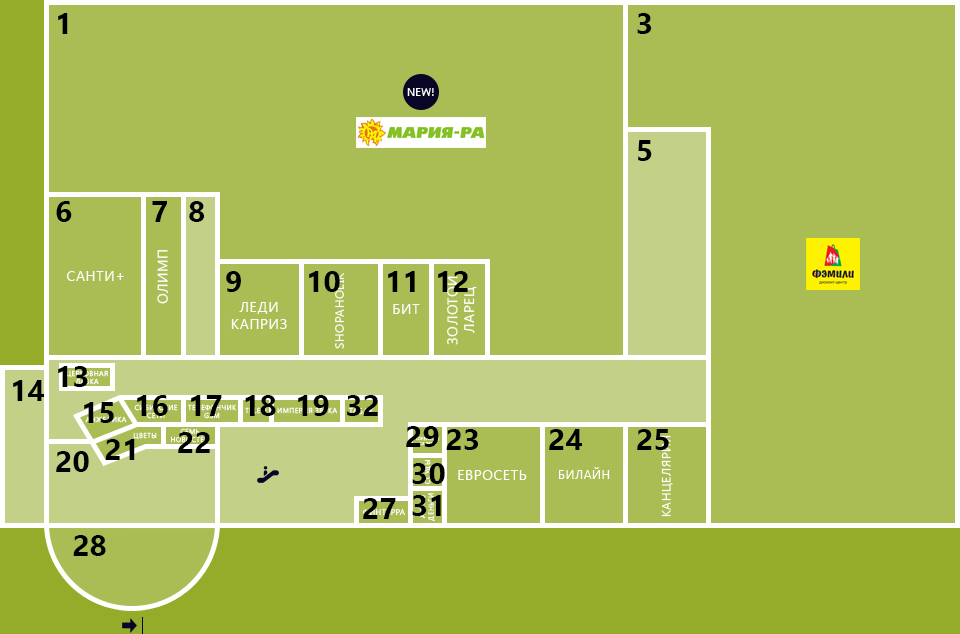
<style>
.page{position:relative;width:960px;height:634px;background:#a9bd54}
.page>*{position:absolute;margin:0}
.t1{font:30px "SegoeUI-Bold";color:#000000}
</style>
<div class="page">
<p class="t1" style="left:58px;top:13px;width:10px;height:21px">1</p>
<p class="t1" style="left:637px;top:13px;width:15px;height:21px">3</p>
<p class="t1" style="left:638px;top:140px;width:14px;height:21px">5</p>
<p class="t1" style="left:56px;top:201px;width:16px;height:21px">6</p>
<p class="t1" style="left:152px;top:201px;width:15px;height:21px">7</p>
<p class="t1" style="left:189px;top:201px;width:16px;height:21px">8</p>
<p class="t1" style="left:226px;top:271px;width:15px;height:21px">9</p>
<p class="t1" style="left:309px;top:271px;width:31px;height:21px">10</p>
<p class="t1" style="left:388px;top:271px;width:27px;height:21px">11</p>
<p class="t1" style="left:438px;top:271px;width:30px;height:21px">12</p>
<p class="t1" style="left:58px;top:366px;width:30px;height:21px">13</p>
<p class="t1" style="left:13px;top:380px;width:31px;height:21px">14</p>
<p class="t1" style="left:137px;top:395px;width:31px;height:21px">16</p>
<p class="t1" style="left:191px;top:395px;width:31px;height:21px">17</p>
<p class="t1" style="left:245px;top:395px;width:31px;height:21px">18</p>
<p class="t1" style="left:298px;top:395px;width:31px;height:21px">19</p>
<p class="t1" style="left:347px;top:395px;width:31px;height:21px">32</p>
<p class="t1" style="left:84px;top:402px;width:30px;height:21px">15</p>
<p class="t1" style="left:178px;top:432px;width:32px;height:21px">22</p>
<p class="t1" style="left:406px;top:426px;width:33px;height:21px">29</p>
<p class="t1" style="left:446px;top:429px;width:33px;height:21px">23</p>
<p class="t1" style="left:549px;top:429px;width:33px;height:21px">24</p>
<p class="t1" style="left:637px;top:429px;width:32px;height:21px">25</p>
<p class="t1" style="left:105px;top:439px;width:30px;height:21px">21</p>
<p class="t1" style="left:56px;top:451px;width:33px;height:21px">20</p>
<p class="t1" style="left:412px;top:463px;width:33px;height:21px">30</p>
<p class="t1" style="left:412px;top:495px;width:29px;height:21px">31</p>
<p class="t1" style="left:363px;top:498px;width:33px;height:21px">27</p>
<p class="t1" style="left:73px;top:535px;width:33px;height:21px">28</p>
</div>
